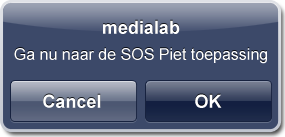
<style>
.page{position:relative;width:285px;height:137px;background:#3c4969}
.page>*{position:absolute;margin:0}
.t1{font:18px "Arial-BoldMT";color:#ffffff}
.t2{font:16px "ArialMT";color:#ffffff}
</style>
<div class="page">
<p class="t1" style="left:103px;top:20px;width:77px;height:14px">medialab</p>
<p class="t2" style="left:14px;top:48px;width:253px;height:16px">Ga nu naar de SOS Piet toepassing</p>
<p class="t1" style="left:43px;top:94px;width:58px;height:14px">Cancel</p>
<p class="t1" style="left:195px;top:94px;width:27px;height:14px">OK</p>
</div>
